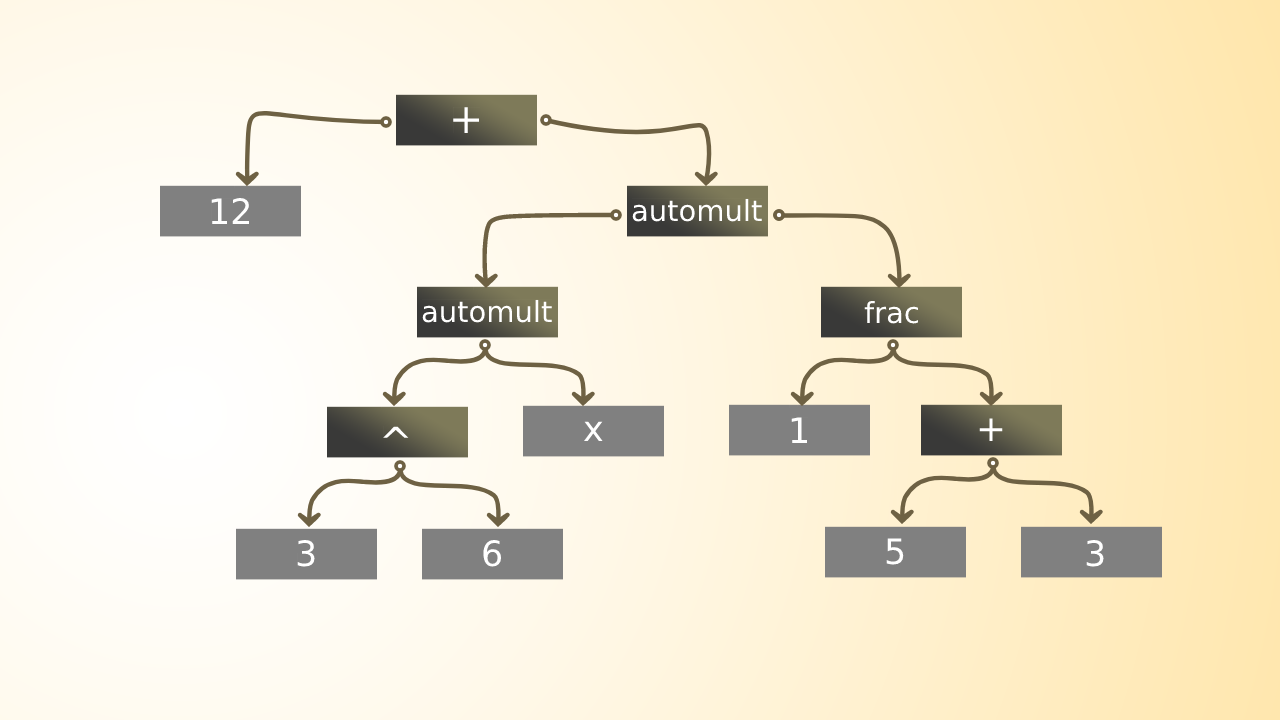
<style>
.page{position:relative;width:1280px;height:720px}
.page>*{position:absolute;margin:0}
.t1{font:41px "DejaVuSans";color:#ffffff}
.t2{font:35px "DejaVuSans";color:#ffffff}
.t3{font:29px "DejaVuSans";color:#ffffff}
.t4{font:36px "DejaVuSans";color:#ffffff}
.t5{font:40px "DejaVuSans";color:#ffffff}
</style>
<div class="page">
<p class="t1" style="left:453px;top:107px;width:27px;height:26px">+</p>
<p class="t2" style="left:211px;top:198px;width:39px;height:26px">12</p>
<p class="t3" style="left:632px;top:198px;width:130px;height:24px">automult</p>
<p class="t3" style="left:422px;top:299px;width:130px;height:24px">automult</p>
<p class="t3" style="left:864px;top:300px;width:55px;height:24px">frac</p>
<p class="t2" style="left:584px;top:421px;width:19px;height:20px">x</p>
<p class="t2" style="left:791px;top:417px;width:17px;height:26px">1</p>
<p class="t4" style="left:979px;top:418px;width:24px;height:23px">+</p>
<p class="t5" style="left:383px;top:426px;width:26px;height:12px">^</p>
<p class="t2" style="left:297px;top:540px;width:18px;height:27px">3</p>
<p class="t2" style="left:483px;top:540px;width:19px;height:27px">6</p>
<p class="t2" style="left:886px;top:538px;width:18px;height:27px">5</p>
<p class="t2" style="left:1086px;top:540px;width:18px;height:27px">3</p>
</div>
